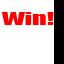
<style>
.page{position:relative;width:64px;height:64px;background:#ffffff}
.page>*{position:absolute;margin:0}
.t1{font:16.7px "Impact";color:#ff0000;scale:1.67 1}
</style>
<div class="page">
<p class="t1" style="left:1px;top:12px;width:53px;height:13px">Win!</p>
</div>
